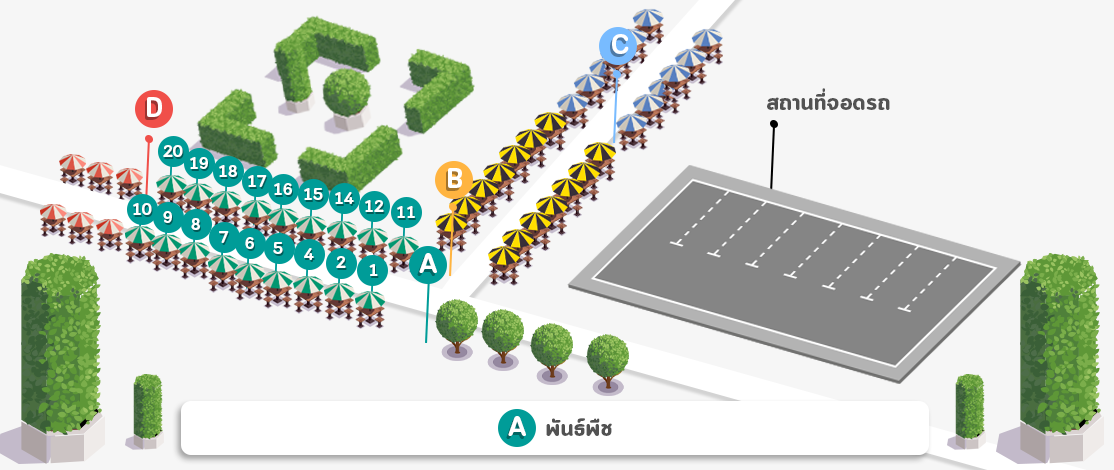
<style>
.page{position:relative;width:1114px;height:470px;background:#f6f6f6}
.page>*{position:absolute;margin:0}
.t1{font:27.5px "CloudSoft-Bold";color:#ffffff}
.t2{font:24px "CloudSoft-Bold";color:#525252}
.t3{font:16.9px "CloudSoft-Bold";color:#ffffff}
</style>
<div class="page">
<p class="t1" style="left:612px;top:34px;width:17px;height:20px">C</p>
<p class="t2" style="left:767px;top:88px;width:123px;height:22px">สถานที่จอดรถ</p>
<p class="t1" style="left:147px;top:97px;width:15px;height:20px">D</p>
<p class="t3" style="left:163px;top:145px;width:20px;height:12px">20</p>
<p class="t3" style="left:190px;top:157px;width:18px;height:12px">19</p>
<p class="t3" style="left:219px;top:165px;width:18px;height:12px">18</p>
<p class="t1" style="left:448px;top:168px;width:14px;height:20px">B</p>
<p class="t3" style="left:248px;top:175px;width:19px;height:12px">17</p>
<p class="t3" style="left:274px;top:183px;width:18px;height:12px">16</p>
<p class="t3" style="left:304px;top:188px;width:19px;height:12px">15</p>
<p class="t3" style="left:335px;top:192px;width:19px;height:12px">14</p>
<p class="t3" style="left:133px;top:203px;width:19px;height:12px">10</p>
<p class="t3" style="left:365px;top:200px;width:19px;height:12px">12</p>
<p class="t3" style="left:397px;top:206px;width:18px;height:12px">11</p>
<p class="t3" style="left:163px;top:211px;width:9px;height:12px">9</p>
<p class="t3" style="left:191px;top:218px;width:9px;height:12px">8</p>
<p class="t3" style="left:219px;top:231px;width:10px;height:12px">7</p>
<p class="t3" style="left:245px;top:237px;width:9px;height:12px">6</p>
<p class="t3" style="left:273px;top:242px;width:10px;height:12px">5</p>
<p class="t3" style="left:304px;top:248px;width:10px;height:12px">4</p>
<p class="t3" style="left:336px;top:256px;width:10px;height:12px">2</p>
<p class="t1" style="left:419px;top:253px;width:18px;height:20px">A</p>
<p class="t3" style="left:369px;top:264px;width:9px;height:12px">1</p>
<p class="t1" style="left:508px;top:416px;width:18px;height:20px">A</p>
<p class="t2" style="left:546px;top:418px;width:66px;height:18px">พันธ์พืช</p>
</div>
